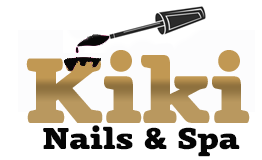
<style>
.page{position:relative;width:262px;height:160px;background:#ffffff}
.page>*{position:absolute;margin:0}
.t1{font:30px "VaccineW08-Black";color:#050505}
.t2{font:92px "VaccineW08-Black";color:#d6a350}
</style>
<div class="page">
<p class="t1" style="left:43px;top:125px;width:197px;height:32px"><span class="t2"><br><br>  </span>Nails &amp; Spa</p>
</div>
